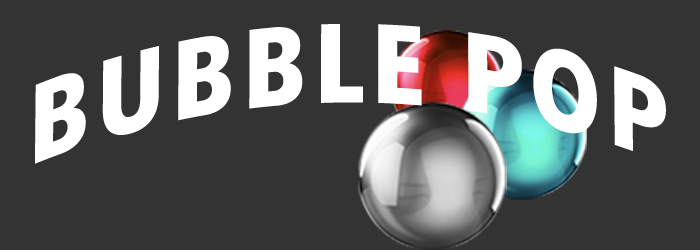
<style>
.page{position:relative;width:700px;height:250px;background:#333333}
.page>*{position:absolute;margin:0}
.t1{font:120px "AvenirNextCondensed-Bold";letter-spacing:0.05em;color:#ffffff;text-transform:uppercase;scale:0.92 1}
</style>
<div class="page">
<p class="t1" style="left:35px;top:24px;width:631px;height:140px">Bubble Pop</p>
</div>
